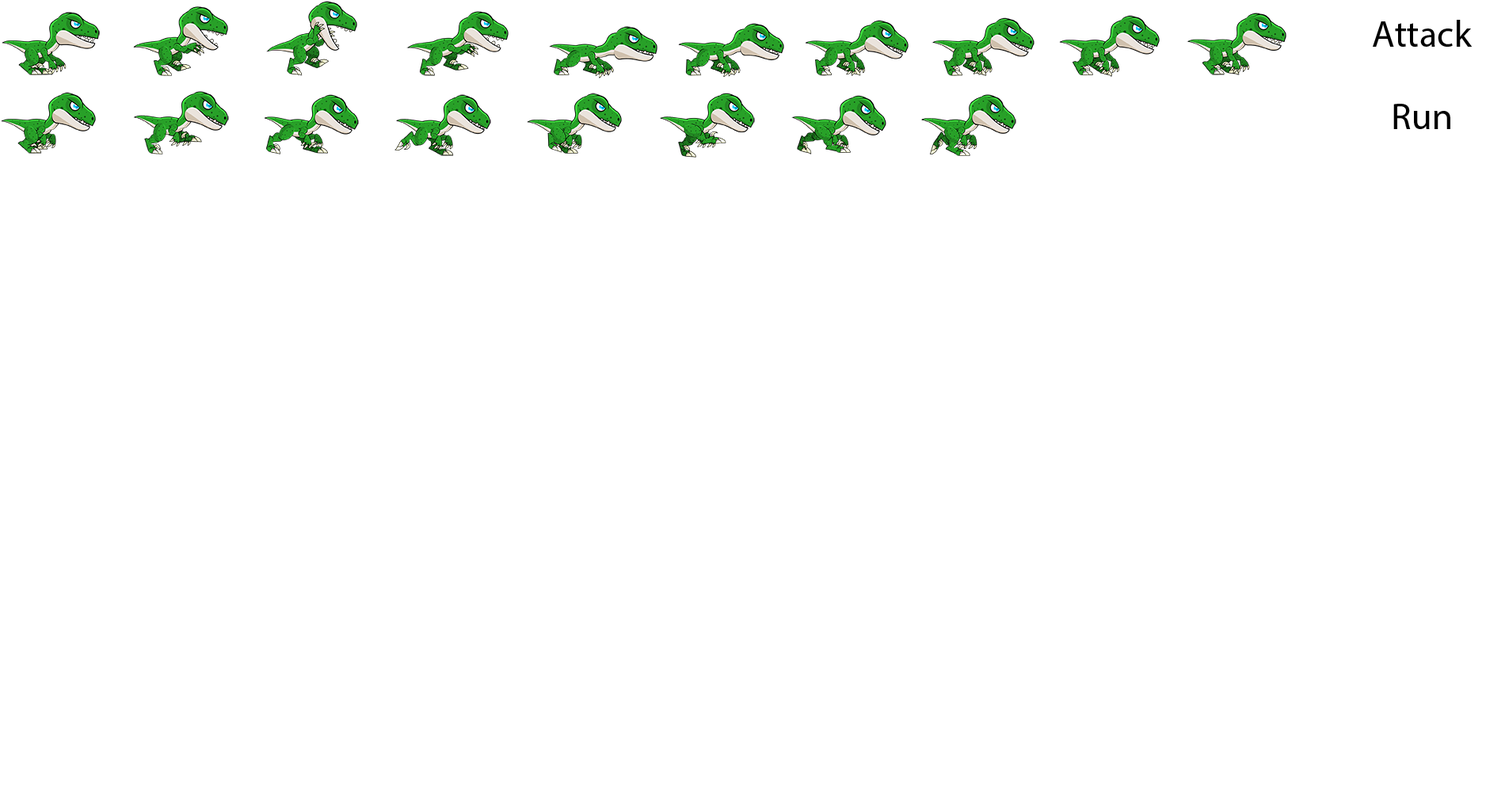
<style>
.page{position:relative;width:1505px;height:792px;background:#ffffff}
.page>*{position:absolute;margin:0}
.t1{font:37.2px "MyriadPro-Regular";color:#000000}
</style>
<div class="page">
<p class="t1" style="left:1373px;top:20px;width:100px;height:27px">Attack</p>
<p class="t1" style="left:1393px;top:104px;width:58px;height:25px">Run</p>
</div>
